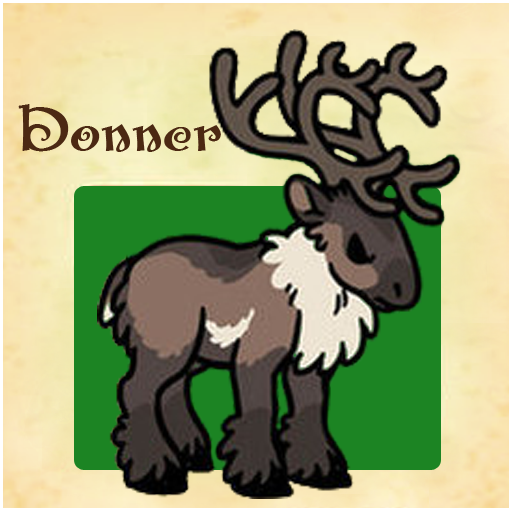
<style>
.page{position:relative;width:512px;height:512px}
.page>*{position:absolute;margin:0}
.t1{font:66.7px "SantasBigSecretBB";color:#4c2913}
</style>
<div class="page">
<p class="t1" style="left:18px;top:104px;width:203px;height:48px">Donner</p>
</div>
